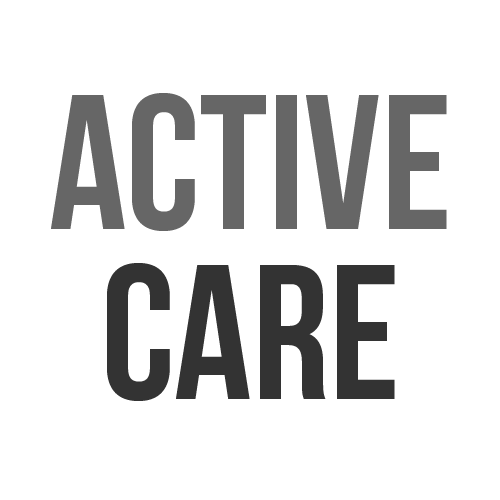
<style>
.page{position:relative;width:500px;height:500px;background:#ffffff}
.page>*{position:absolute;margin:0}
.t1{font:191px/170px "BebasNeue";color:#666666}
.t2{font:191px/170px "BebasNeue";color:#333333}
</style>
<div class="page">
<p class="t1" style="left:51px;top:93px;width:396px;height:308px;text-align:center">ACTIVE<br><span class="t2">CARE</span></p>
</div>
